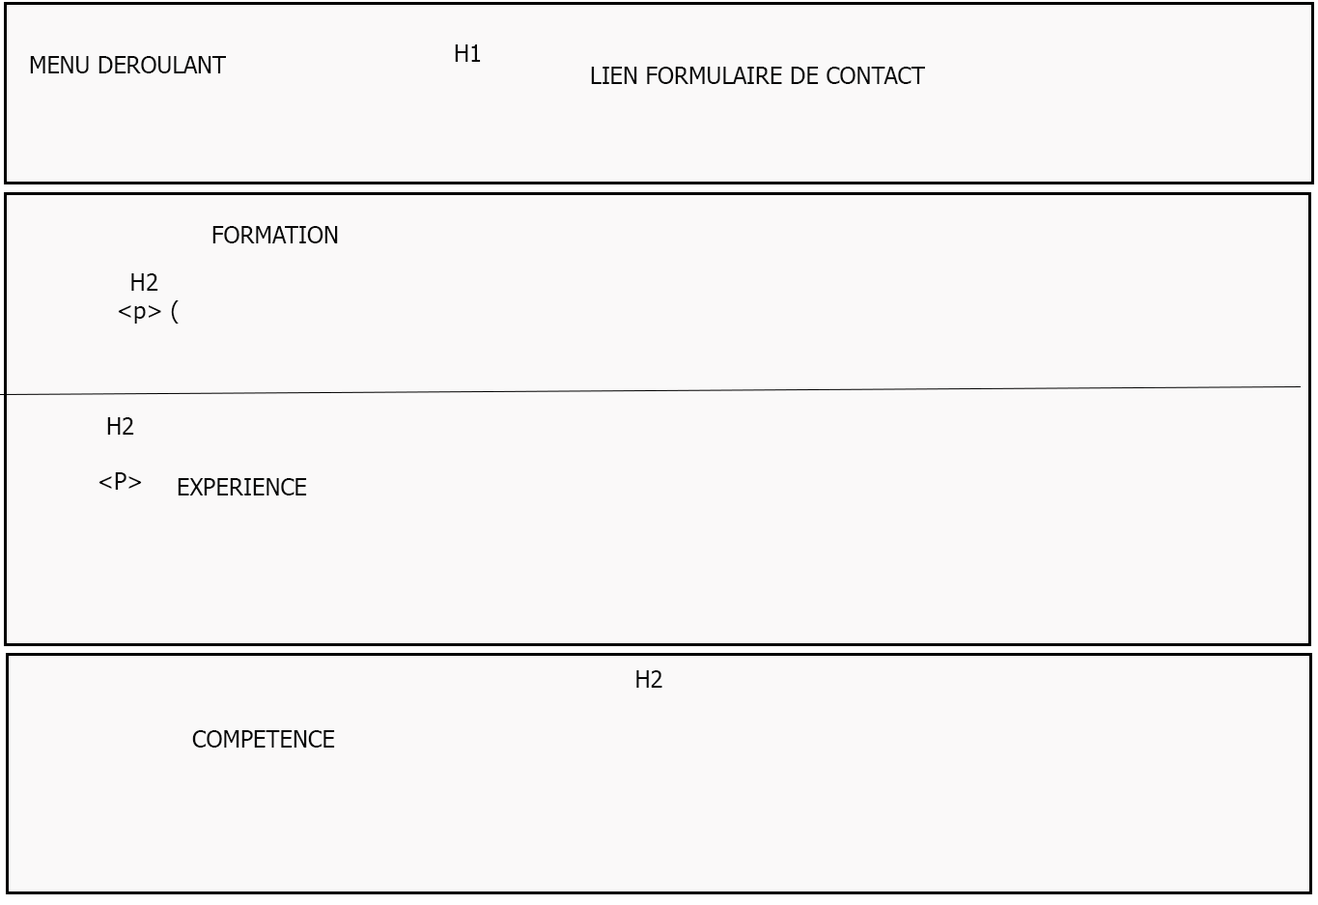
<style>
.page{position:relative;width:1318px;height:905px;background:#faf9f9}
.page>*{position:absolute;margin:0}
.t1{font:23.2px "Tahoma";color:#090909}
</style>
<div class="page">
<p class="t1" style="left:455px;top:44px;width:26px;height:18px">H1</p>
<p class="t1" style="left:30px;top:56px;width:196px;height:17px">MENU DEROULANT</p>
<p class="t1" style="left:591px;top:67px;width:334px;height:17px">LIEN FORMULAIRE DE CONTACT</p>
<p class="t1" style="left:212px;top:226px;width:126px;height:17px">FORMATION</p>
<p class="t1" style="left:118px;top:273px;width:61px;height:50px;text-align:center">H2 <br> &lt;p&gt; (</p>
<p class="t1" style="left:98px;top:417px;width:44px;height:73px;text-align:center">H2<br><br>&lt;P&gt;</p>
<p class="t1" style="left:178px;top:478px;width:129px;height:17px">EXPERIENCE</p>
<p class="t1" style="left:636px;top:670px;width:26px;height:17px">H2</p>
<p class="t1" style="left:192px;top:730px;width:143px;height:17px">COMPETENCE</p>
</div>
